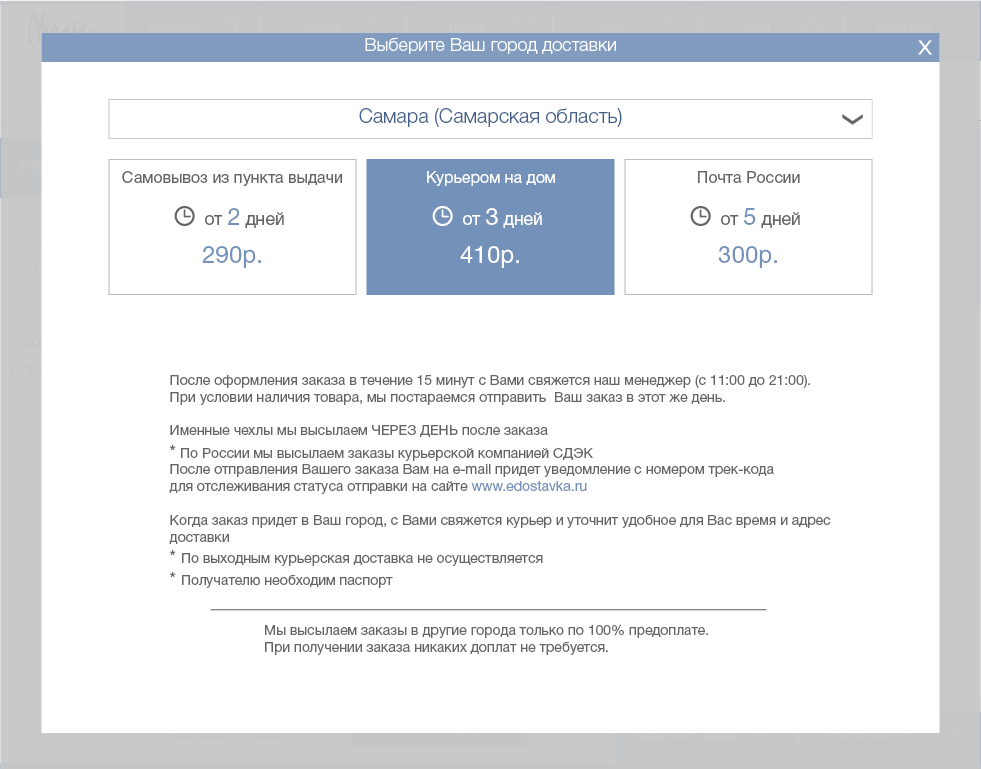
<style>
.page{position:relative;width:981px;height:769px;background:#ffffff}
.page>*{position:absolute;margin:0}
.t1{font:12px "HelveticaNeueCyr-Roman";color:#cacaca}
.t2{font:18px "HelveticaNeueCyr-Light";color:#ffffff}
.t3{font:20px "HelveticaNeueCyr-Light";color:#405e88}
.t4{font:16px "HelveticaNeueCyr-Roman";color:#656565}
.t5{font:16px "HelveticaNeueCyr-Roman";color:#ffffff}
.t6{font:17.7px "HelveticaNeueCyr-Roman";color:#656565}
.t7{font:23.6px "HelveticaNeueCyr-Roman";color:#7491b9}
.t8{font:17.7px "HelveticaNeueCyr-Roman";color:#ffffff}
.t9{font:23.6px "HelveticaNeueCyr-Roman";color:#ffffff}
.t10{font:24px "HelveticaNeueCyr-Roman";color:#7491b9}
.t11{font:24px "HelveticaNeueCyr-Roman";color:#ffffff}
.t12{font:14px "HelveticaNeueCyr-Roman";color:#656565}
.t13{font:18px "HelveticaNeueCyr-Roman";color:#656565}
.t14{font:14px "HelveticaNeueCyr-Roman";color:#7491b9}
</style>
<div class="page">
<p class="t1" style="left:149px;top:22px;width:50px;height:13px">ДЕВАЙС</p>
<p class="t1" style="left:300px;top:24px;width:39px;height:10px">ЧЕХОЛ</p>
<p class="t1" style="left:447px;top:24px;width:38px;height:9px">ТЕКСТ</p>
<p class="t1" style="left:597px;top:24px;width:31px;height:11px">ЦВЕТ</p>
<p class="t1" style="left:743px;top:24px;width:27px;height:9px">ФОН</p>
<p class="t1" style="left:877px;top:22px;width:53px;height:12px">СМАЙЛЫ</p>
<p class="t2" style="left:365px;top:37px;width:251px;height:17px">Выберите Ваш город доставки</p>
<p class="t3" style="left:359px;top:108px;width:263px;height:19px">Самара (Самарская область)</p>
<p class="t4" style="left:122px;top:171px;width:220px;height:15px">Самовывоз из пункта выдачи</p>
<p class="t5" style="left:427px;top:171px;width:128px;height:15px">Курьером на дом</p>
<p class="t4" style="left:698px;top:171px;width:102px;height:12px">Почта России</p>
<p class="t6" style="left:205px;top:208px;width:79px;height:20px">от <span class="t7">2</span> дней</p>
<p class="t8" style="left:463px;top:208px;width:79px;height:20px">от <span class="t9">3</span> дней</p>
<p class="t6" style="left:721px;top:208px;width:79px;height:20px">от <span class="t7">5</span> дней</p>
<p class="t10" style="left:202px;top:246px;width:59px;height:22px">290р.</p>
<p class="t11" style="left:460px;top:246px;width:59px;height:22px">410р.</p>
<p class="t10" style="left:718px;top:246px;width:59px;height:22px">300р.</p>
<p class="t12" style="left:170px;top:375px;width:640px;height:62px">После оформления заказа в течение 15 минут с Вами свяжется наш менеджер (с 11:00 до 21:00).<br>При условии наличия товара, мы постараемся отправить  Ваш заказ в этот же день.<br><br>Именные чехлы мы высылаем ЧЕРЕЗ ДЕНЬ после заказа</p>
<p class="t12" style="left:169px;top:445px;width:662px;height:143px"><span class="t13">*</span> По России мы высылаем заказы курьерской компанией СДЭК<br>После отправления Вашего заказа Вам на e-mail придет уведомление с номером трек-кода<br>для отслеживания статуса отправки на сайте <span class="t14">www.edostavka.ru<br></span><br>Когда заказ придет в Ваш город, с Вами свяжется курьер и уточнит удобное для Вас время и адрес<br>доставки<br><span class="t13">* </span>По выходным курьерская доставка не осуществляется<br><span class="t13">* </span>Получателю необходим паспорт</p>
<p class="t12" style="left:265px;top:624px;width:443px;height:31px">Мы высылаем заказы в другие города только по 100% предоплате. <br>При получении заказа никаких доплат не требуется.</p>
</div>
